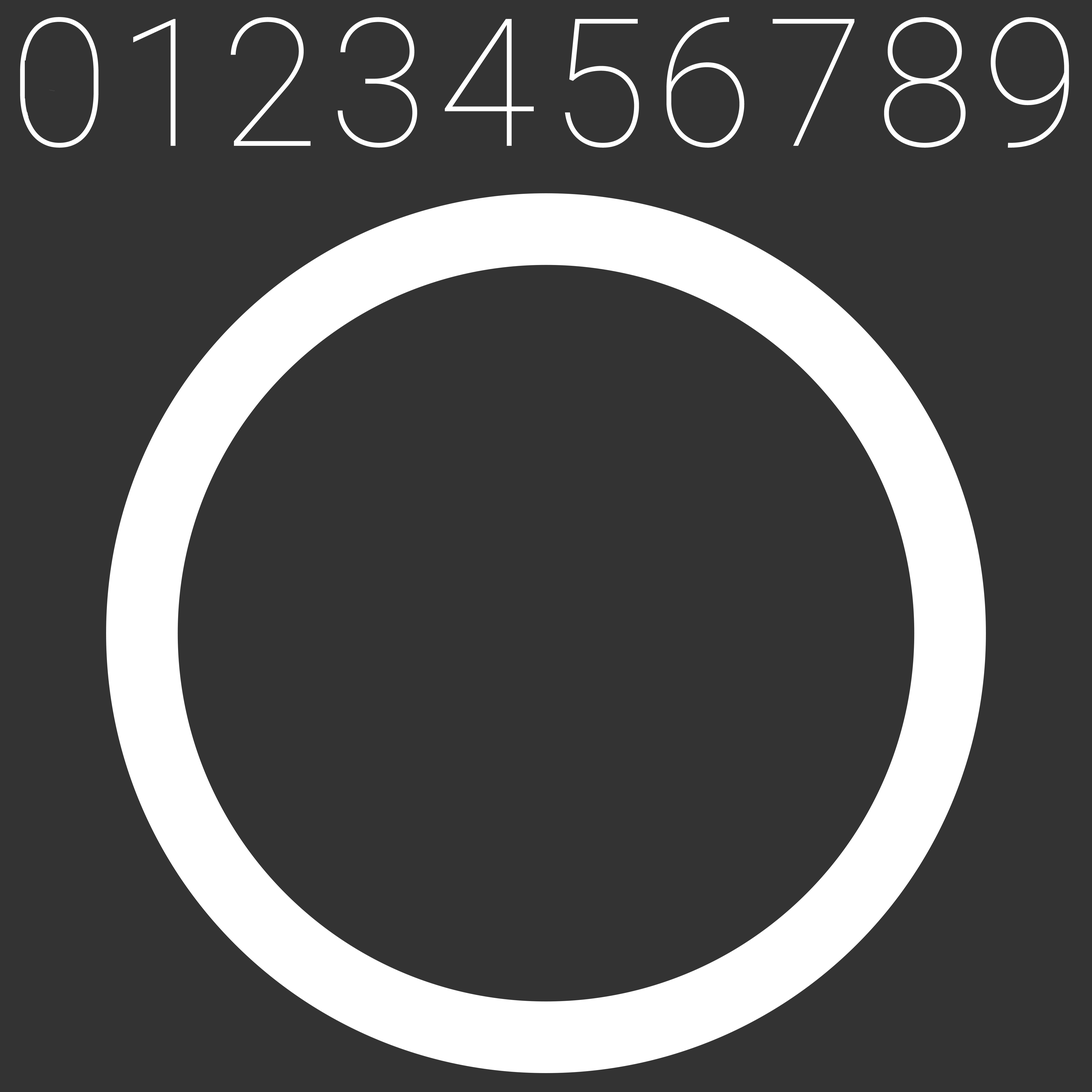
<style>
.page{position:relative;width:1092px;height:1092px;background:#333333}
.page>*{position:absolute;margin:0}
.t1{font:178.5px "RobotoMono-Thin";color:#ffffff}
</style>
<div class="page">
<p class="t1" style="left:20px;top:17px;width:1049px;height:131px">0123456789</p>
</div>
